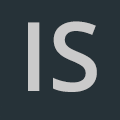
<style>
.page{position:relative;width:120px;height:120px;background:#263238}
.page>*{position:absolute;margin:0}
.t1{font:96px "OpenSans-Semibold";color:#cacaca}
</style>
<div class="page">
<p class="t1" style="left:28px;top:21px;width:69px;height:71px">IS</p>
</div>
